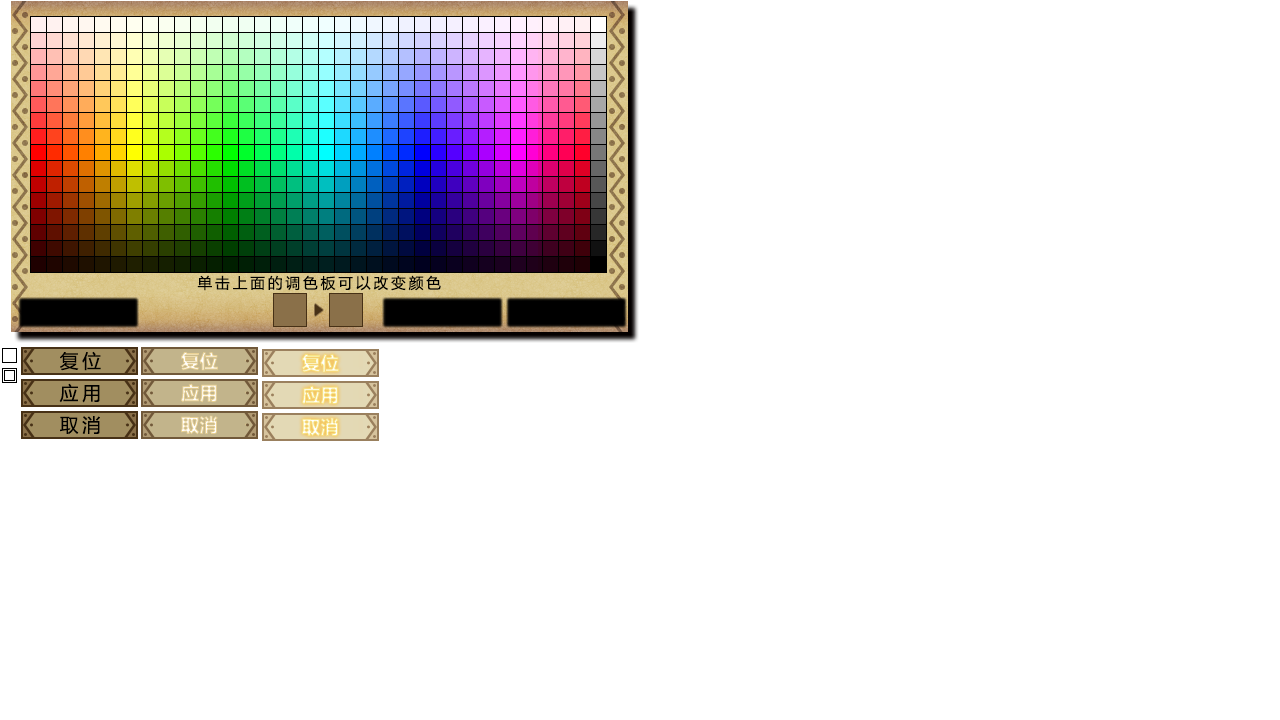
<style>
.page{position:relative;width:1280px;height:720px;background:#ffffff}
.page>*{position:absolute;margin:0}
.t1{font:14.7px "MicrosoftYaHei";letter-spacing:0.2em;color:#000000}
.t2{font:18.7px "MicrosoftYaHei";letter-spacing:0.2em;color:#000000}
.t3{font:18.7px "MicrosoftYaHei-Bold"}
</style>
<div class="page">
<p class="t1" style="left:197px;top:275px;width:244px;height:16px">单击上面的调色板可以改变颜色</p>
<p class="t2" style="left:60px;top:351px;width:41px;height:20px">复位</p>
<p class="t3" style="left:180px;top:352px;width:38px;height:19px">复位</p>
<p class="t3" style="left:301px;top:354px;width:38px;height:19px">复位</p>
<p class="t2" style="left:59px;top:383px;width:41px;height:20px">应用</p>
<p class="t3" style="left:181px;top:383px;width:36px;height:20px">应用</p>
<p class="t3" style="left:302px;top:385px;width:36px;height:20px">应用</p>
<p class="t2" style="left:60px;top:416px;width:40px;height:19px">取消</p>
<p class="t3" style="left:181px;top:415px;width:37px;height:20px">取消</p>
<p class="t3" style="left:302px;top:417px;width:37px;height:20px">取消</p>
</div>
